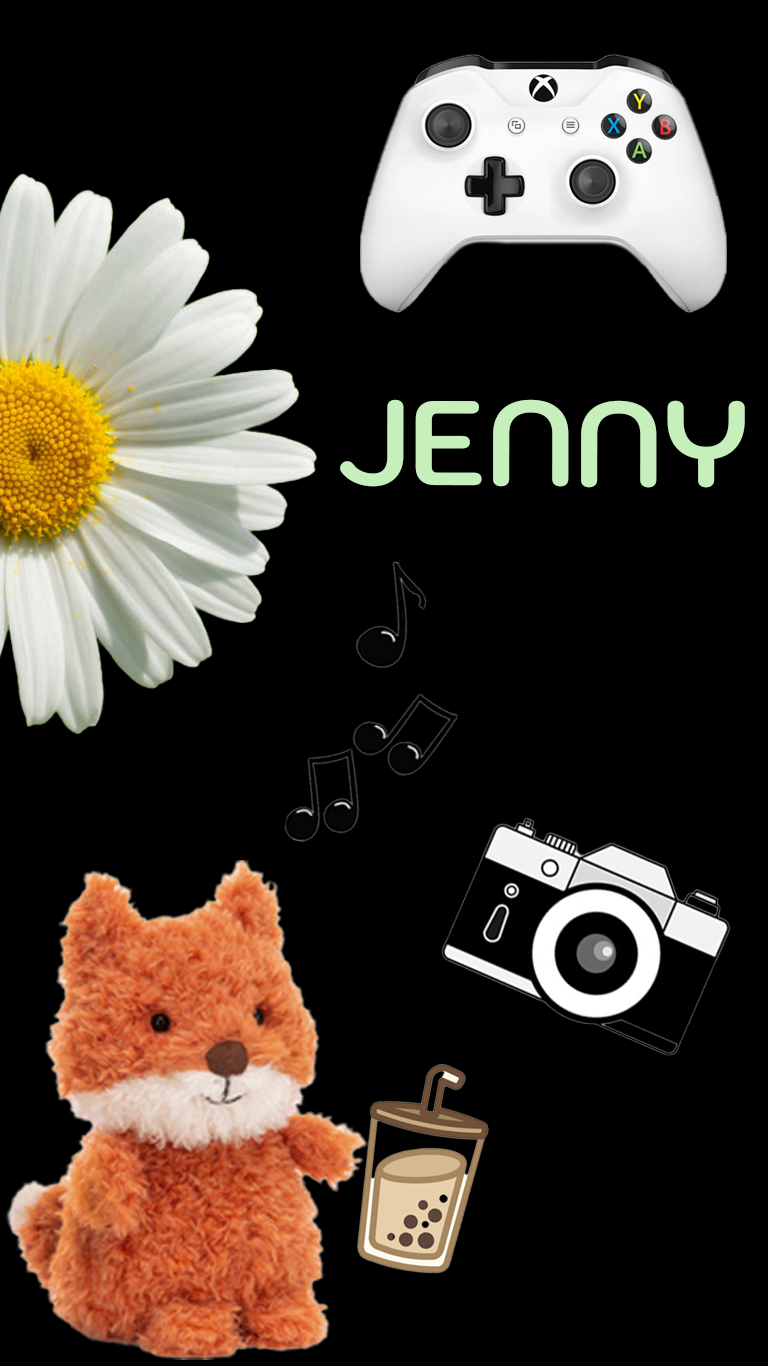
<style>
.page{position:relative;width:768px;height:1366px;background:#000000}
.page>*{position:absolute;margin:0}
.t1{font:120px "Kodchasan-Bold";color:#c6efbc}
</style>
<div class="page">
<p class="t1" style="left:340px;top:399px;width:405px;height:89px">JENNY</p>
</div>
